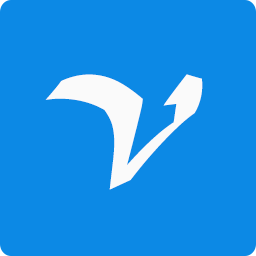
<style>
.page{position:relative;width:256px;height:256px;background:#0c89e5}
.page>*{position:absolute;margin:0}
.t1{font:128px "MaturaMTScriptCapitals";color:#fafafa;font-style:italic}
</style>
<div class="page">
<p class="t1" style="left:45px;top:74px;width:158px;height:116px">V</p>
</div>
